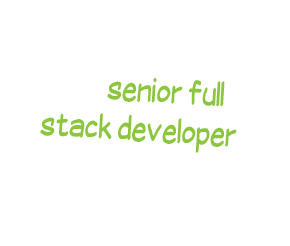
<style>
.page{position:relative;width:290px;height:246px;background:#ffffff}
.page>*{position:absolute;margin:0}
.t1{font:33px "SuplexmentaryComicNC";color:#8cc63f;scale:0.8 1}
.t2{font:36px "SuplexmentaryComicNC";color:#ffffff;scale:0.8 1}
.t3{font:33px "SuplexmentaryComicNC";color:#ffffff;scale:0.8 1}
</style>
<div class="page">
<p class="t1" style="left:38px;top:32px;width:220px;height:156px;rotate:3deg"><span class="t2">Howdi!<br></span><span class="t3">I’m a </span>senior full <br>stack developer<br><span class="t3">and scrum master</span></p>
</div>
